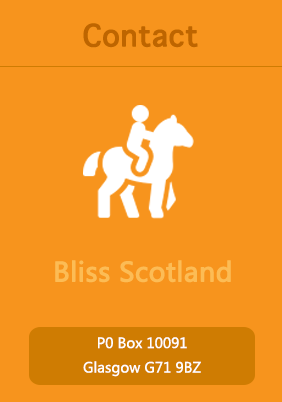
<style>
.page{position:relative;width:282px;height:402px;background:#f7941d}
.page>*{position:absolute;margin:0}
.t1{font:40px "AppleSymbols";color:#be6500;font-weight:bold}
.t2{font:26px "MicrosoftYaHei";color:#fcbc55;font-weight:bold}
.t3{font:14px "MicrosoftYaHei";color:#ffffff}
</style>
<div class="page">
<p class="t1" style="left:83px;top:23px;width:115px;height:25px">Contact</p>
<p class="t2" style="left:55px;top:260px;width:176px;height:23px">Bliss Scotland</p>
<p class="t3" style="left:83px;top:337px;width:118px;height:40px;text-align:center">P0 Box 10091<br>Glasgow G71 9BZ</p>
</div>
